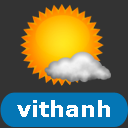
<style>
.page{position:relative;width:128px;height:128px;background:#333333}
.page>*{position:absolute;margin:0}
.t1{font:22px "Verdana-Bold";color:#ffffff}
</style>
<div class="page">
<p class="t1" style="left:17px;top:100px;width:93px;height:17px">vithanh</p>
</div>
